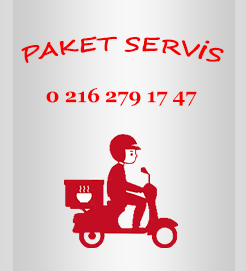
<style>
.page{position:relative;width:246px;height:271px}
.page>*{position:absolute;margin:0}
.t1{font:20px "SegoeScript-Bold";color:#f60101;text-transform:uppercase}
.t2{font:20px "Georgia-Bold";color:#f60101;text-transform:uppercase}
</style>
<div class="page">
<p class="t1" style="left:21px;top:36px;width:203px;height:27px">PAKET SERVİS</p>
<p class="t2" style="left:46px;top:88px;width:151px;height:18px">0 216 279 17 47</p>
</div>
